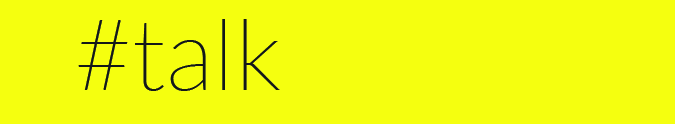
<style>
.page{position:relative;width:675px;height:124px;background:#f5ff0f}
.page>*{position:absolute;margin:0}
.t1{font:100px "Lato-Thin";color:#141819}
</style>
<div class="page">
<p class="t1" style="left:78px;top:19px;width:202px;height:72px">#talk</p>
</div>
